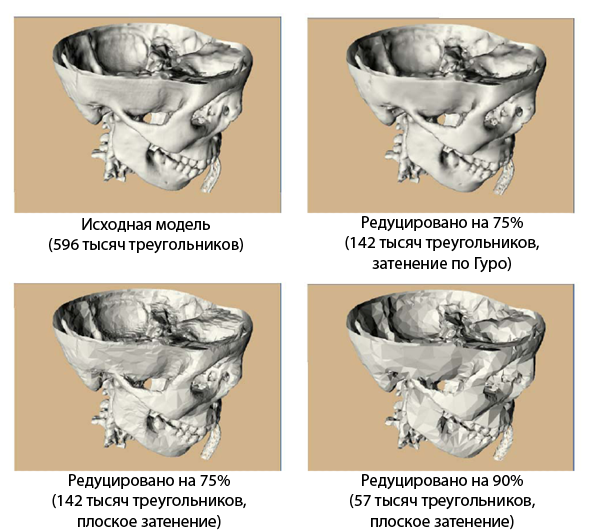
<style>
.page{position:relative;width:590px;height:532px;background:#ffffff}
.page>*{position:absolute;margin:0}
.t1{font:17px "MyriadPro-Regular";color:#000000}
</style>
<div class="page">
<p class="t1" style="left:49px;top:218px;width:194px;height:36px;text-align:center">Исходная модель<br>(596 тысяч треугольников)</p>
<p class="t1" style="left:345px;top:216px;width:194px;height:57px;text-align:center">Редуцировано на 75%<br>(142 тысяч треугольников,<br>затенение по Гуро)</p>
<p class="t1" style="left:52px;top:474px;width:194px;height:56px;text-align:center">Редуцировано на 75%<br>(142 тысяч треугольников,<br>плоское затенение)</p>
<p class="t1" style="left:350px;top:474px;width:185px;height:56px;text-align:center">Редуцировано на 90%<br>(57 тысяч треугольников,<br>плоское затенение)</p>
</div>
